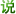
<style>
.page{position:relative;width:16px;height:14px;background:#ffffff}
.page>*{position:absolute;margin:0}
.t1{font:15.2px "AdobeHeitiStd-Regular";scale:1.03 1}
.t2{font:11.6px "AdobeHeitiStd-Regular";scale:1.03 1}
.t3{font:11.6px "SimSun";scale:1.03 1}
</style>
<div class="page">
<p class="t1" style="left:0px;top:0px;width:16px;height:14px;text-align:center">说<br><span class="t2"><br>s<br></span><span class="t3"><br>说</span></p>
</div>
